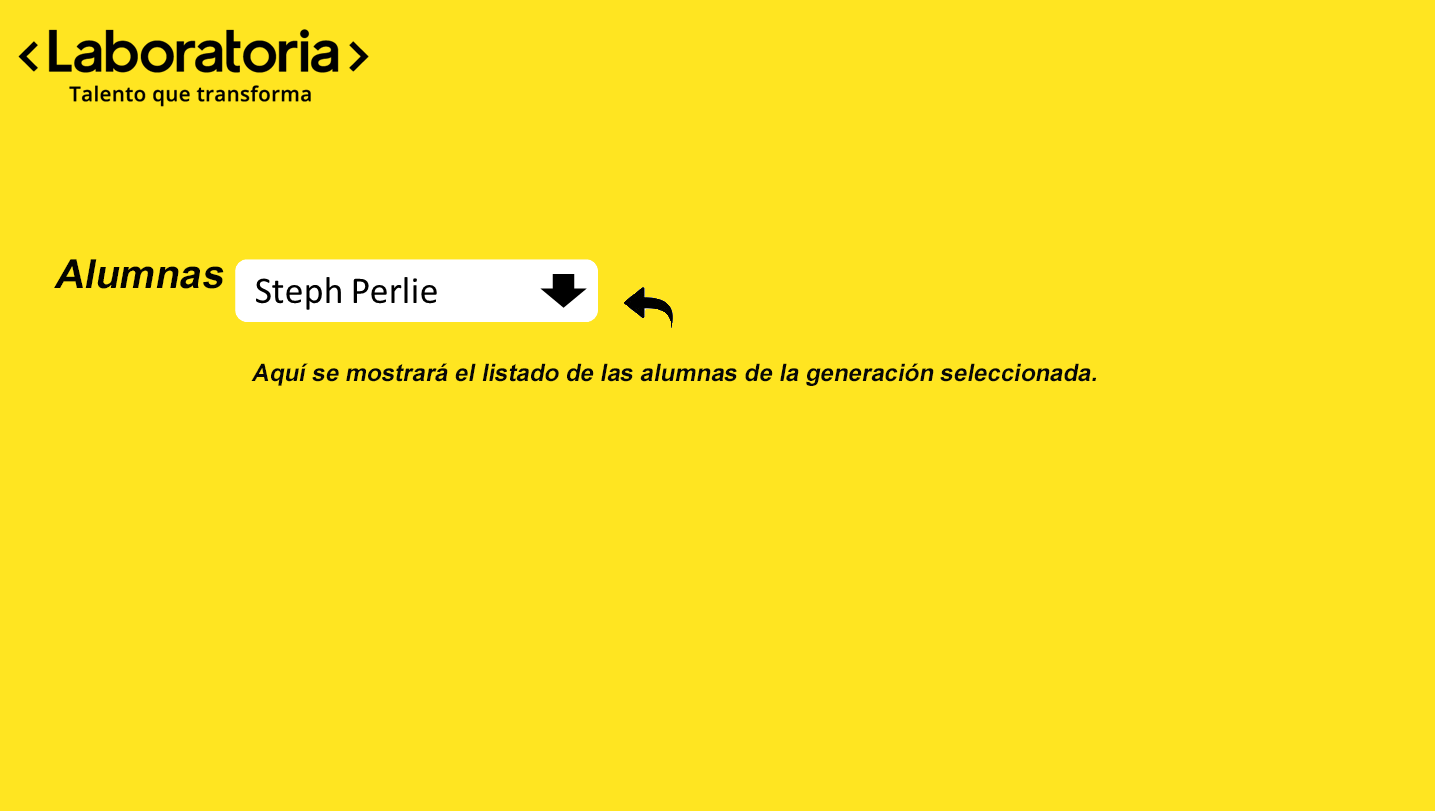
<style>
.page{position:relative;width:1435px;height:811px;background:#ffe521}
.page>*{position:absolute;margin:0}
.t1{font:40px "Arial-BoldMT";color:#030300;font-style:italic}
.t2{font:24px "Arial-BoldMT";color:#070707;font-style:italic}
</style>
<div class="page">
<p class="t1" style="left:54px;top:259px;width:170px;height:30px">Alumnas</p>
<p class="t2" style="left:251px;top:363px;width:845px;height:23px">Aquí se mostrará el listado de las alumnas de la generación seleccionada.</p>
</div>
